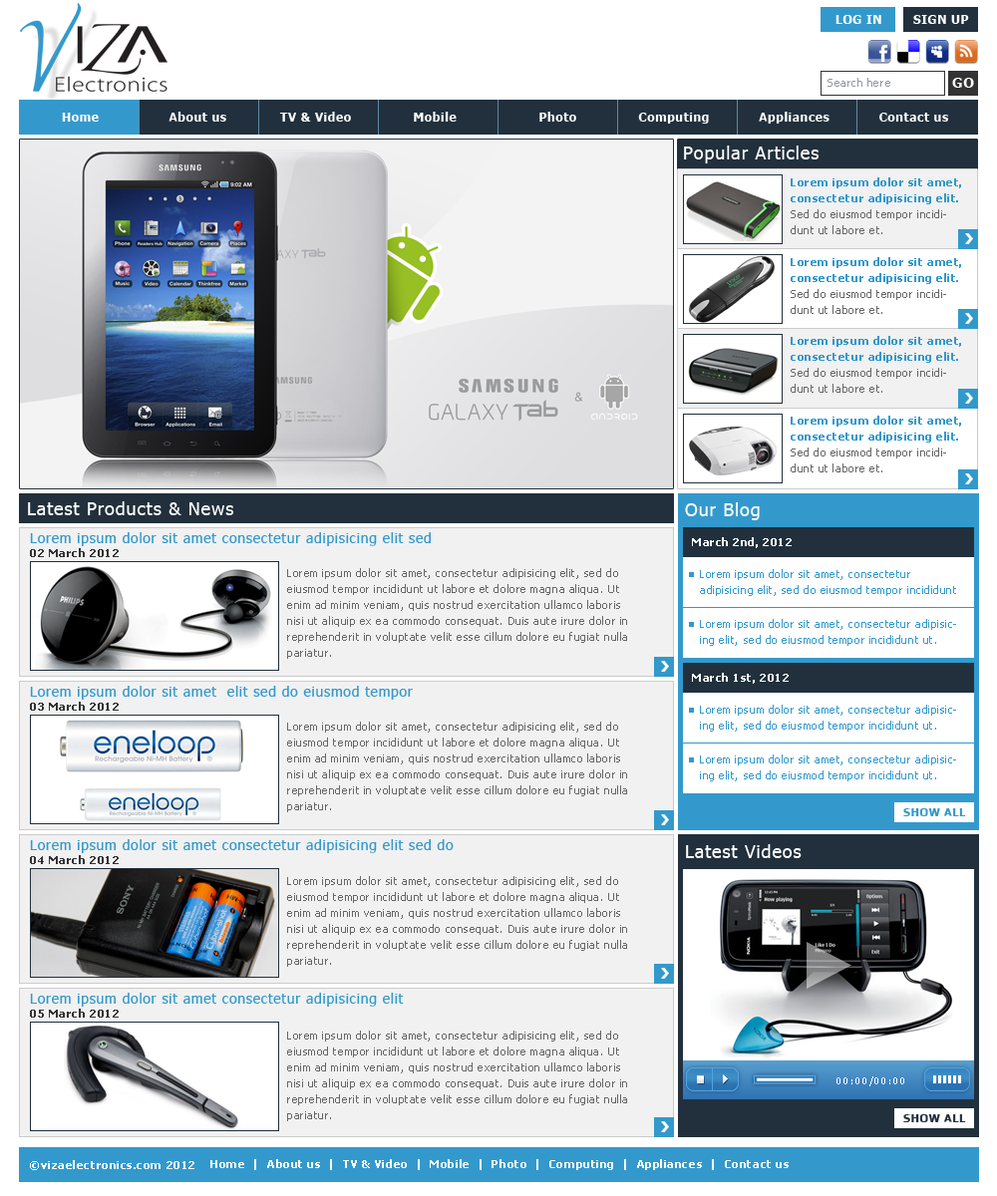
<style>
.page{position:relative;width:997px;height:1196px;background:#ffffff}
.page>*{position:absolute;margin:0}
.t1{font:12px "Tahoma-Bold";letter-spacing:0.05em;color:#ffffff}
.t2{font:11px "Tahoma";letter-spacing:0.05em;color:#90979d}
.t3{font:14px "Tahoma-Bold";letter-spacing:0.05em;color:#ffffff}
.t4{font:17.9px "Tahoma";letter-spacing:0.05em;color:#ffffff}
.t5{font:11px/15.9px "Tahoma-Bold";letter-spacing:0.05em;color:#3399cc}
.t6{font:11px/15.9px "Tahoma";letter-spacing:0.05em;color:#666666}
.t7{font:17.9px "Tahoma";letter-spacing:0.05em;color:#feffff}
.t8{font:14px "Tahoma";letter-spacing:0.05em;color:#3399cc}
.t9{font:11px "Tahoma-Bold";letter-spacing:0.05em;color:#ffffff}
.t10{font:11px "Tahoma-Bold";letter-spacing:0.05em;color:#333333}
.t11{font:11px/15.9px "Tahoma";letter-spacing:0.05em;color:#3399cc}
.t12{font:11px "Tahoma-Bold";letter-spacing:0.05em;color:#3399cc}
.t13{font:11px "Tahoma-Bold";letter-spacing:0.05em;color:#21303c}
</style>
<div class="page">
<p class="t1" style="left:835px;top:15px;width:46px;height:9px">LOG IN</p>
<p class="t1" style="left:913px;top:15px;width:56px;height:9px">SIGN UP</p>
<p class="t2" style="left:827px;top:78px;width:63px;height:9px">Search here</p>
<p class="t3" style="left:952px;top:78px;width:22px;height:10px">GO</p>
<p class="t1" style="left:62px;top:112px;width:886px;height:12px">Home                 About us             TV &amp; Video               Mobile                    Photo               Computing            Appliances            Contact us</p>
<p class="t4" style="left:684px;top:146px;width:134px;height:17px">Popular Articles</p>
<p class="t5" style="left:790px;top:177px;width:171px;height:27px">Lorem ipsum dolor sit amet, consectetur adipisicing elit.</p>
<p class="t6" style="left:790px;top:209px;width:156px;height:25px">Sed do eiusmod tempor incididunt ut labore et.</p>
<p class="t5" style="left:790px;top:257px;width:171px;height:27px">Lorem ipsum dolor sit amet, consectetur adipisicing elit.</p>
<p class="t6" style="left:790px;top:289px;width:156px;height:25px">Sed do eiusmod tempor incididunt ut labore et.</p>
<p class="t5" style="left:790px;top:336px;width:171px;height:27px">Lorem ipsum dolor sit amet, consectetur adipisicing elit.</p>
<p class="t6" style="left:790px;top:368px;width:156px;height:25px">Sed do eiusmod tempor incididunt ut labore et.</p>
<p class="t5" style="left:790px;top:416px;width:171px;height:27px">Lorem ipsum dolor sit amet, consectetur adipisicing elit.</p>
<p class="t6" style="left:790px;top:448px;width:156px;height:25px">Sed do eiusmod tempor incididunt ut labore et.</p>
<p class="t7" style="left:28px;top:501px;width:205px;height:14px">Latest Products &amp; News</p>
<p class="t4" style="left:685px;top:502px;width:75px;height:18px">Our Blog</p>
<p class="t8" style="left:30px;top:532px;width:401px;height:14px">Lorem ipsum dolor sit amet consectetur adipisicing elit sed</p>
<p class="t9" style="left:692px;top:537px;width:99px;height:11px">March 2nd, 2012</p>
<p class="t10" style="left:30px;top:548px;width:89px;height:9px">02 March 2012</p>
<p class="t6" style="left:287px;top:568px;width:340px;height:91px">Lorem ipsum dolor sit amet, consectetur adipisicing elit, sed do eiusmod tempor incididunt ut labore et dolore magna aliqua. Ut enim ad minim veniam, quis nostrud exercitation ullamco laboris nisi ut aliquip ex ea commodo consequat. Duis aute irure dolor in reprehenderit in voluptate velit esse cillum dolore eu fugiat nulla pariatur.</p>
<p class="t11" style="left:700px;top:569px;width:256px;height:27px">Lorem ipsum dolor sit amet, consectetur adipisicing elit, sed do eiusmod tempor incididunt ut.</p>
<p class="t11" style="left:700px;top:619px;width:256px;height:27px">Lorem ipsum dolor sit amet, consectetur adipisicing elit, sed do eiusmod tempor incididunt ut.</p>
<p class="t9" style="left:692px;top:673px;width:97px;height:11px">March 1st, 2012</p>
<p class="t8" style="left:30px;top:686px;width:383px;height:14px">Lorem ipsum dolor sit amet  elit sed do eiusmod tempor</p>
<p class="t10" style="left:30px;top:702px;width:89px;height:9px">03 March 2012</p>
<p class="t11" style="left:700px;top:705px;width:256px;height:27px">Lorem ipsum dolor sit amet, consectetur adipisicing elit, sed do eiusmod tempor incididunt ut.</p>
<p class="t6" style="left:287px;top:722px;width:340px;height:90px">Lorem ipsum dolor sit amet, consectetur adipisicing elit, sed do eiusmod tempor incididunt ut labore et dolore magna aliqua. Ut enim ad minim veniam, quis nostrud exercitation ullamco laboris nisi ut aliquip ex ea commodo consequat. Duis aute irure dolor in reprehenderit in voluptate velit esse cillum dolore eu fugiat nulla pariatur.</p>
<p class="t11" style="left:700px;top:755px;width:256px;height:27px">Lorem ipsum dolor sit amet, consectetur adipisicing elit, sed do eiusmod tempor incididunt ut.</p>
<p class="t12" style="left:903px;top:808px;width:63px;height:8px">SHOW ALL</p>
<p class="t8" style="left:30px;top:839px;width:424px;height:14px">Lorem ipsum dolor sit amet consectetur adipisicing elit sed do</p>
<p class="t4" style="left:686px;top:844px;width:115px;height:14px">Latest Videos</p>
<p class="t10" style="left:30px;top:855px;width:89px;height:9px">04 March 2012</p>
<p class="t6" style="left:287px;top:876px;width:340px;height:91px">Lorem ipsum dolor sit amet, consectetur adipisicing elit, sed do eiusmod tempor incididunt ut labore et dolore magna aliqua. Ut enim ad minim veniam, quis nostrud exercitation ullamco laboris nisi ut aliquip ex ea commodo consequat. Duis aute irure dolor in reprehenderit in voluptate velit esse cillum dolore eu fugiat nulla pariatur.</p>
<p class="t8" style="left:30px;top:993px;width:374px;height:14px">Lorem ipsum dolor sit amet consectetur adipisicing elit</p>
<p class="t10" style="left:30px;top:1009px;width:89px;height:9px">05 March 2012</p>
<p class="t6" style="left:287px;top:1031px;width:340px;height:90px">Lorem ipsum dolor sit amet, consectetur adipisicing elit, sed do eiusmod tempor incididunt ut labore et dolore magna aliqua. Ut enim ad minim veniam, quis nostrud exercitation ullamco laboris nisi ut aliquip ex ea commodo consequat. Duis aute irure dolor in reprehenderit in voluptate velit esse cillum dolore eu fugiat nulla pariatur.</p>
<p class="t13" style="left:903px;top:1114px;width:63px;height:8px">SHOW ALL</p>
<p class="t9" style="left:30px;top:1160px;width:164px;height:10px">©vizaelectronics.com 2012</p>
<p class="t9" style="left:210px;top:1159px;width:579px;height:11px">Home  |  About us  |  TV &amp; Video  |  Mobile  |  Photo  |  Computing  |  Appliances  |  Contact us</p>
</div>
